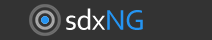
<style>
.page{position:relative;width:212px;height:40px;background:#333333}
.page>*{position:absolute;margin:0}
.t1{font:30px "Corbel";letter-spacing:-0.02em;color:#ffffff}
.t2{font:30px "Corbel";letter-spacing:-0.02em;color:#2494f2}
</style>
<div class="page">
<p class="t1" style="left:66px;top:8px;width:77px;height:22px">sdx<span class="t2">NG</span></p>
</div>
